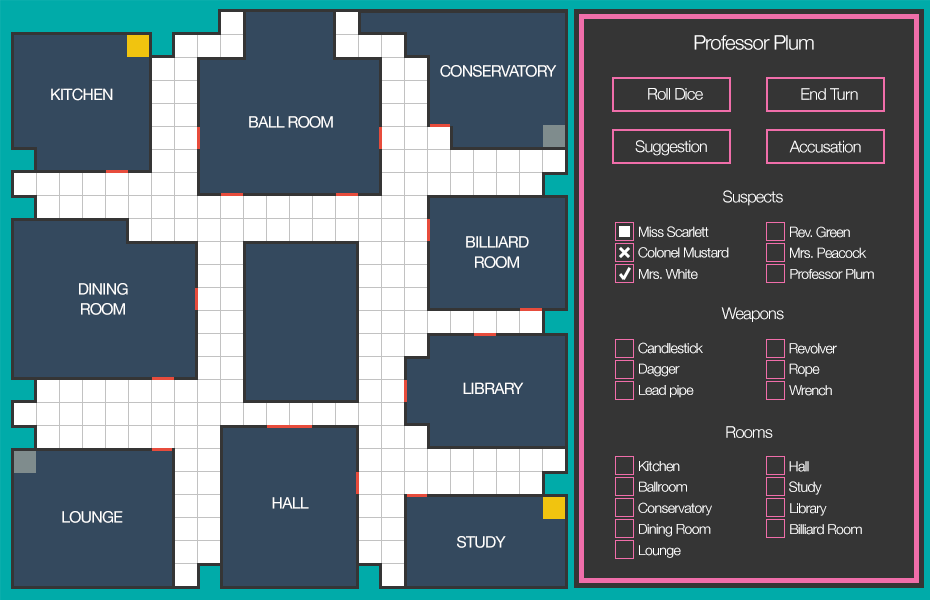
<style>
.page{position:relative;width:930px;height:600px;background:#353535}
.page>*{position:absolute;margin:0}
.t1{font:20px "HelveticaNeue-Light";letter-spacing:-0.04em;color:#ffffff}
.t2{font:15.8px "HelveticaNeue";letter-spacing:-0.04em;color:#ffffff}
.t3{font:16px "HelveticaNeue-Light";letter-spacing:-0.04em;color:#ffffff}
.t4{font:15.9px "HelveticaNeue-Light";letter-spacing:-0.04em;color:#ffffff}
.t5{font:14px "HelveticaNeue-Light";letter-spacing:-0.04em;color:#ffffff}
.t6{font:14.1px "HelveticaNeue-Light";letter-spacing:-0.04em;color:#ffffff}
.t7{font:15.8px/20.2px "HelveticaNeue";letter-spacing:-0.04em;color:#ffffff}
.t8{font:13.8px "HelveticaNeue-Light";letter-spacing:-0.04em;color:#ffffff}
.t9{font:13.9px "HelveticaNeue-Light";letter-spacing:-0.04em;color:#ffffff}
.t10{font:15.8px/20.1px "HelveticaNeue";letter-spacing:-0.04em;color:#ffffff}
.t11{font:13.7px "HelveticaNeue-Light";letter-spacing:-0.04em;color:#ffffff}
</style>
<div class="page">
<p class="t1" style="left:694px;top:35px;width:120px;height:15px">Professor Plum</p>
<p class="t2" style="left:440px;top:65px;width:117px;height:12px">CONSERVATORY</p>
<p class="t2" style="left:51px;top:88px;width:62px;height:13px">KITCHEN</p>
<p class="t3" style="left:648px;top:88px;width:55px;height:12px">Roll Dice</p>
<p class="t3" style="left:801px;top:88px;width:57px;height:12px">End Turn</p>
<p class="t2" style="left:249px;top:116px;width:84px;height:12px">BALL ROOM</p>
<p class="t4" style="left:635px;top:140px;width:72px;height:16px">Suggestion</p>
<p class="t4" style="left:789px;top:140px;width:72px;height:13px">Accusation</p>
<p class="t4" style="left:723px;top:190px;width:60px;height:16px">Suspects</p>
<p class="t5" style="left:639px;top:226px;width:70px;height:11px">Miss Scarlett</p>
<p class="t6" style="left:790px;top:226px;width:60px;height:12px">Rev. Green</p>
<p class="t7" style="left:466px;top:236px;width:63px;height:32px;text-align:center">BILLIARD<br>ROOM</p>
<p class="t8" style="left:638px;top:247px;width:91px;height:11px">Colonel Mustard</p>
<p class="t9" style="left:790px;top:247px;width:77px;height:11px">Mrs. Peacock</p>
<p class="t8" style="left:639px;top:269px;width:59px;height:10px">Mrs. White</p>
<p class="t8" style="left:790px;top:269px;width:84px;height:10px">Professor Plum</p>
<p class="t10" style="left:79px;top:283px;width:49px;height:32px;text-align:center">DINING<br>ROOM</p>
<p class="t4" style="left:721px;top:307px;width:63px;height:15px">Weapons</p>
<p class="t5" style="left:638px;top:342px;width:65px;height:12px">Candlestick</p>
<p class="t6" style="left:789px;top:343px;width:48px;height:11px">Revolver</p>
<p class="t8" style="left:639px;top:363px;width:41px;height:14px">Dagger</p>
<p class="t9" style="left:789px;top:363px;width:31px;height:14px">Rope</p>
<p class="t2" style="left:463px;top:382px;width:61px;height:12px">LIBRARY</p>
<p class="t8" style="left:639px;top:385px;width:55px;height:13px">Lead pipe</p>
<p class="t8" style="left:789px;top:385px;width:43px;height:11px">Wrench</p>
<p class="t4" style="left:726px;top:426px;width:47px;height:12px">Rooms</p>
<p class="t5" style="left:639px;top:461px;width:41px;height:11px">Kitchen</p>
<p class="t6" style="left:789px;top:461px;width:20px;height:11px">Hall</p>
<p class="t8" style="left:639px;top:481px;width:48px;height:11px">Ballroom</p>
<p class="t9" style="left:789px;top:481px;width:33px;height:14px">Study</p>
<p class="t2" style="left:272px;top:497px;width:37px;height:12px">HALL</p>
<p class="t8" style="left:638px;top:502px;width:74px;height:14px">Conservatory</p>
<p class="t8" style="left:790px;top:503px;width:37px;height:13px">Library</p>
<p class="t2" style="left:62px;top:511px;width:61px;height:12px">LOUNGE</p>
<p class="t11" style="left:639px;top:524px;width:72px;height:13px">Dining Room</p>
<p class="t8" style="left:790px;top:524px;width:72px;height:11px">Billiard Room</p>
<p class="t2" style="left:457px;top:536px;width:49px;height:12px">STUDY</p>
<p class="t11" style="left:639px;top:545px;width:42px;height:13px">Lounge</p>
</div>
